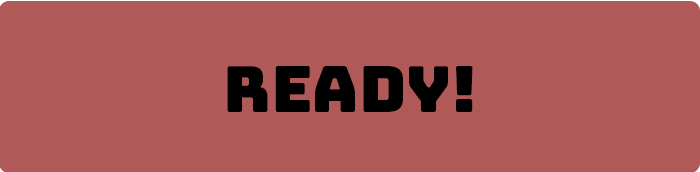
<style>
.page{position:relative;width:700px;height:172px;background:#b05959}
.page>*{position:absolute;margin:0}
.t1{font:63.6px "Bungee-Regular";color:#000000}
</style>
<div class="page">
<p class="t1" style="left:227px;top:66px;width:246px;height:46px">READY!</p>
</div>
